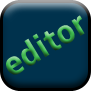
<style>
.page{position:relative;width:91px;height:91px;background:#00324d}
.page>*{position:absolute;margin:0}
.t1{font:34.1px "MayberryPro-Semibold";letter-spacing:0.005em}
</style>
<div class="page">
<p class="t1" style="left:6px;top:15px;width:79px;height:60px;rotate:-31deg">editor</p>
</div>
